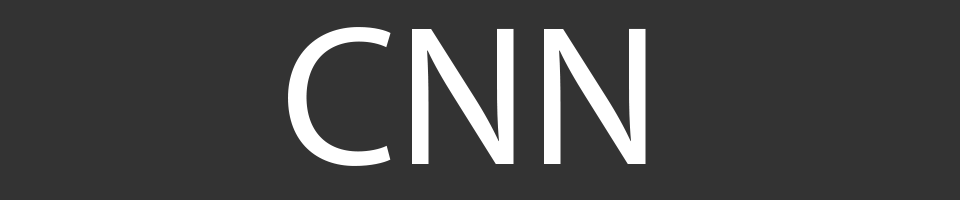
<style>
.page{position:relative;width:960px;height:200px;background:#333333}
.page>*{position:absolute;margin:0}
.t1{font:200px "MyriadPro-Regular";color:#ffffff}
</style>
<div class="page">
<p class="t1" style="left:288px;top:27px;width:358px;height:139px">CNN</p>
</div>
